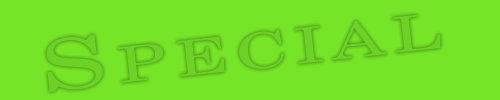
<style>
.page{position:relative;width:500px;height:100px;background:#76e527}
.page>*{position:absolute;margin:0}
.t1{font:70px "Century";letter-spacing:0.1em;color:#6ed226;font-variant:small-caps;scale:1.51 1}
</style>
<div class="page">
<p class="t1" style="left:46px;top:14px;width:395px;height:78px;rotate:-6deg">Special</p>
</div>
